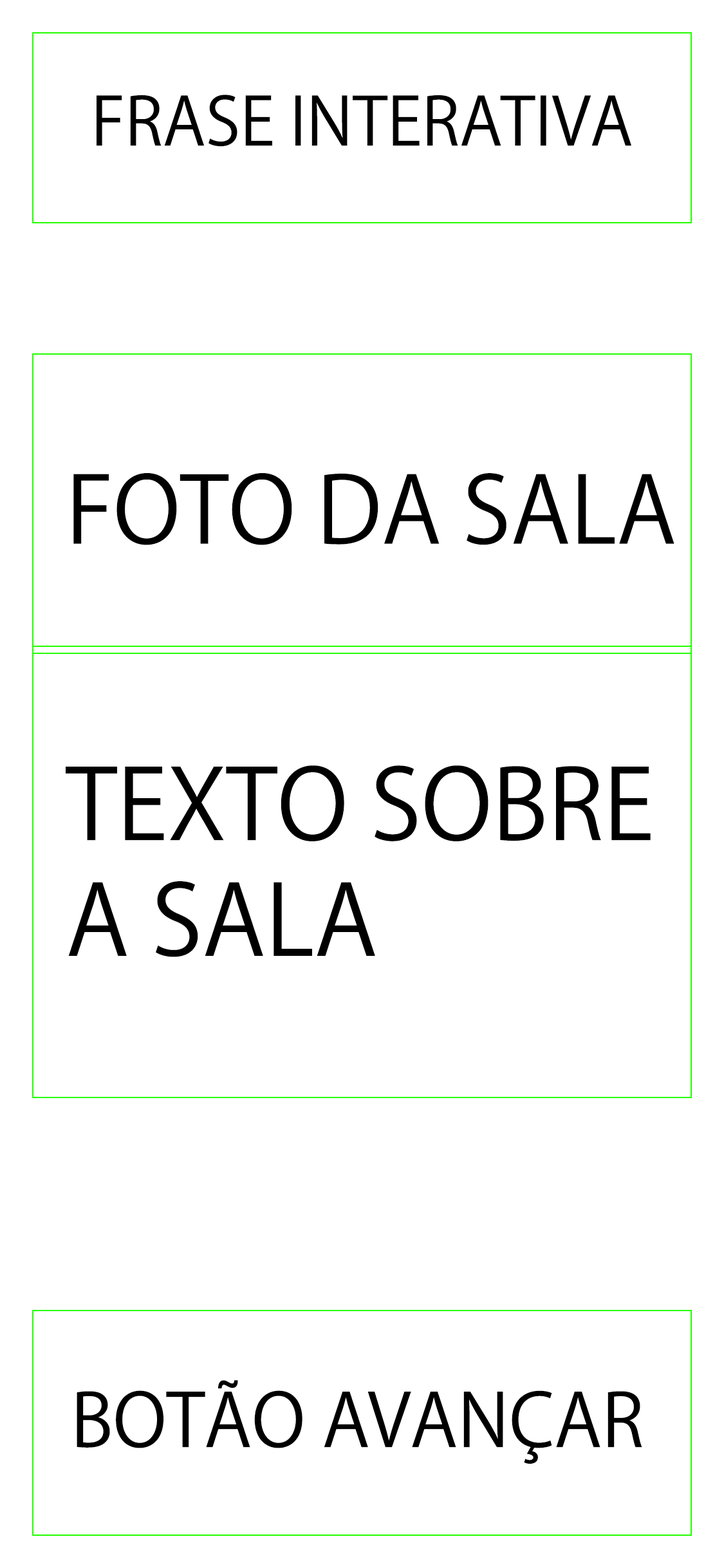
<style>
.page{position:relative;width:724px;height:1568px;background:#ffffff}
.page>*{position:absolute;margin:0}
.t1{font:65.5px "KozGoPr6N-Regular";color:#000000}
.t2{font:91.2px "KozGoPr6N-Regular";color:#000000}
.t3{font:96.4px "KozGoPr6N-Regular";color:#000000}
.t4{font:72.7px "KozGoPr6N-Regular";color:#000000}
</style>
<div class="page">
<p class="t1" style="left:97px;top:95px;width:534px;height:52px">FRASE INTERATIVA</p>
<p class="t2" style="left:73px;top:473px;width:602px;height:72px">FOTO DA SALA</p>
<p class="t3" style="left:66px;top:765px;width:585px;height:192px">TEXTO SOBRE <br>A SALA</p>
<p class="t4" style="left:77px;top:1380px;width:565px;height:84px">BOTÃO AVANÇAR</p>
</div>
